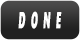
<style>
.page{position:relative;width:80px;height:40px;background:#202020}
.page>*{position:absolute;margin:0}
.t1{font:22.9px "SegoeUIBlack";letter-spacing:0.62em;color:#ffffff;font-weight:bold;font-style:italic;scale:0.38 1}
</style>
<div class="page">
<p class="t1" style="left:18px;top:11px;width:44px;height:18px">DONE</p>
</div>
